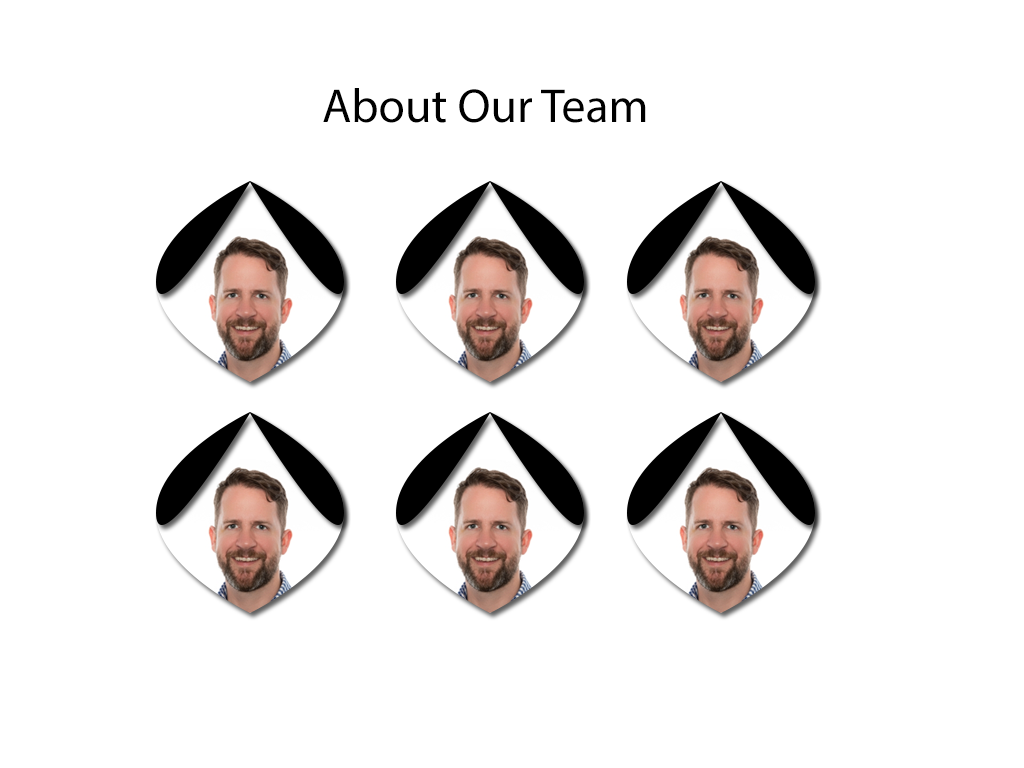
<style>
.page{position:relative;width:1024px;height:768px;background:#ffffff}
.page>*{position:absolute;margin:0}
.t1{font:48px "MyriadPro-Regular";color:#000000}
</style>
<div class="page">
<p class="t1" style="left:323px;top:88px;width:323px;height:35px">About Our Team</p>
</div>
